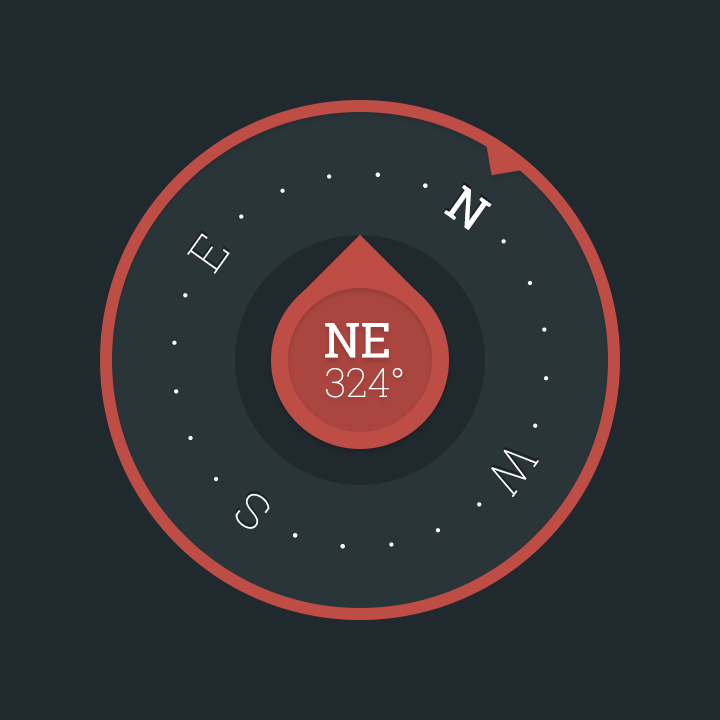
<style>
.page{position:relative;width:720px;height:720px;background:#20292e}
.page>*{position:absolute;margin:0}
.t1{font:47.9px "RobotoSlab-Regular";color:#ffffff}
.t2{font:47.6px "RobotoSlab-Thin";color:#ffffff}
.t3{font:48px "RobotoSlab-Regular";color:#ffffff}
.t4{font:40px "RobotoSlab-Thin";color:#ffffff}
.t5{font:48px "RobotoSlab-Thin";color:#ffffff}
.t6{font:47.5px "RobotoSlab-Thin";color:#ffffff;scale:1.04 1}
</style>
<div class="page">
<p class="t1" style="left:444px;top:185px;width:48px;height:45px;rotate:35deg">N</p>
<p class="t2" style="left:187px;top:233px;width:43px;height:41px;rotate:-55deg">E</p>
<p class="t3" style="left:325px;top:323px;width:64px;height:35px">NE</p>
<p class="t4" style="left:326px;top:368px;width:77px;height:30px">324°</p>
<p class="t5" style="left:491px;top:449px;width:48px;height:48px;rotate:125deg">W</p>
<p class="t6" style="left:235px;top:494px;width:35px;height:35px;rotate:-145deg">S</p>
</div>
